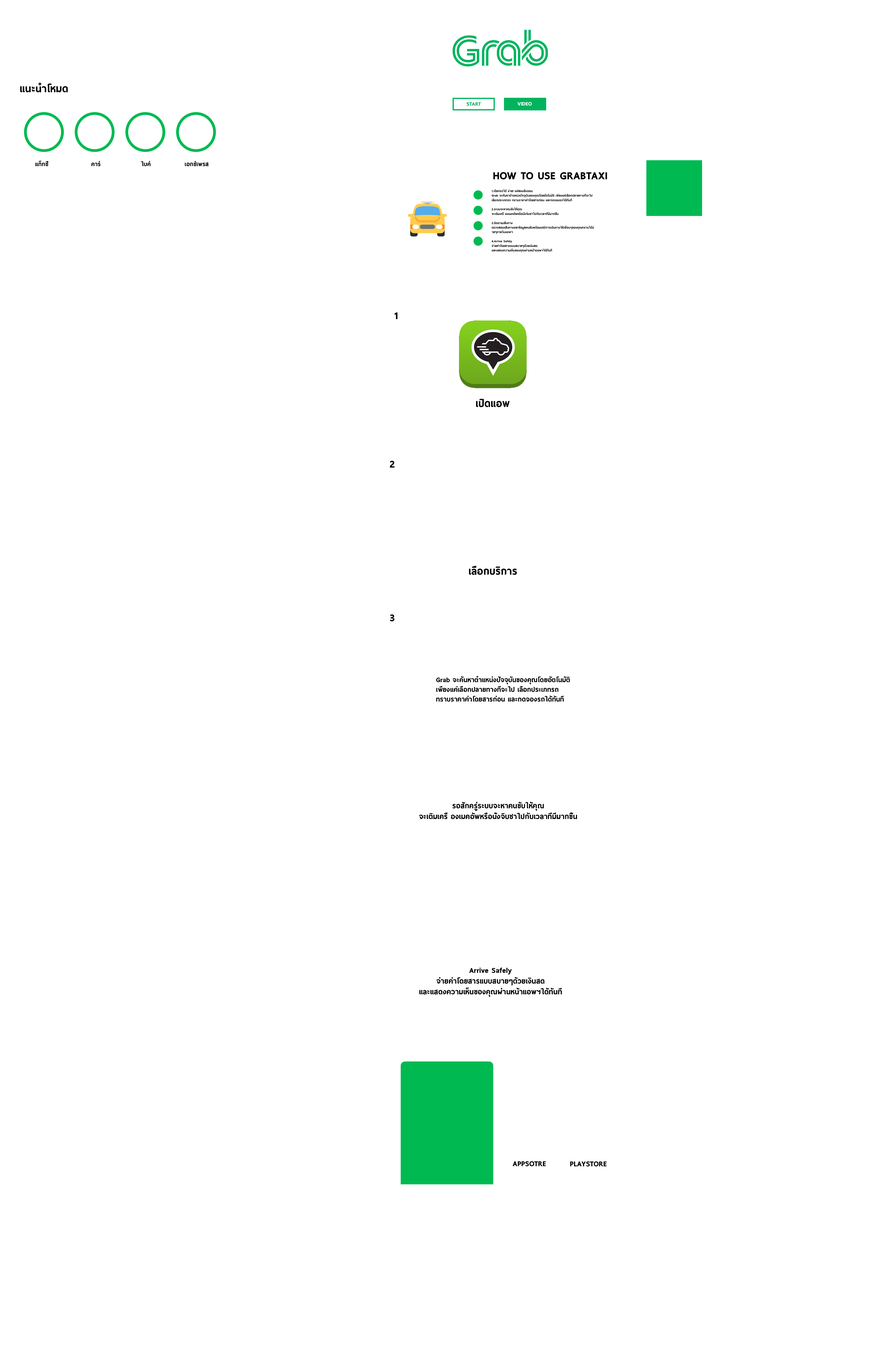
<style>
.page{position:relative;width:873px;height:1365px;background:#ffffff}
.page>*{position:absolute;margin:0}
.t1{font:12.5px "ThaiSansNeue-Black";color:#000000}
.t2{font:6.4px "ThaiSansNeue-Black";color:#ffffff}
.t3{font:6.4px "ThaiSansNeue-Black";color:#00b45e}
.t4{font:7.1px "ThaiSansNeue-Black";color:#000000}
.t5{font:13.1px "ThaiSansNeue-Black";color:#000000}
.t6{font:3.8px "ThaiSansNeue-Black";color:#000000}
.t7{font:8.1px "ThaiSansNeue-Black";color:#000000}
.t8{font:9px "ThaiSansNeue-Black";color:#000000}
</style>
<div class="page">
<p class="t1" style="left:20px;top:83px;width:48px;height:9px">แนะนำโหมด</p>
<p class="t2" style="left:518px;top:102px;width:14px;height:4px">VIDEO</p>
<p class="t3" style="left:467px;top:102px;width:14px;height:4px">START</p>
<p class="t4" style="left:35px;top:160px;width:174px;height:6px">แท็กซี่       คาร์       ไบค์      เอกซ์เพรส</p>
<p class="t5" style="left:493px;top:172px;width:114px;height:7px">HOW TO USE GRABTAXI</p>
<p class="t6" style="left:492px;top:189px;width:102px;height:64px">1.เรียกรถได้ ง่าย! แค่สองขั้นตอน<br>Grab จะค้นหาตำแหน่งปัจจุบันของคุณโดยอัตโนมัติ เพียงแค่เลือกปลายทางที่จะไป เลือกประเภทรถ ทราบราคาค่าโดยสารก่อน และกดจองรถได้ทันที<br><br>2.ระบบจะหาคนขับให้คุณ<br>จะเติมเครื่ องเมคอัพหรือนั่งจิบชาไปกับเวลาที่มีมากขึ้น<br><br>3.ติดตามเส้นทาง<br>ตรวจสอบเส้นทางและข้อมูลคนขับพร้อมแชร์การเดินทางให้เพื่อนๆของคุณทราบได้ง่ายๆภายในแอพฯ<br><br>4.Arrive Safely<br>จ่ายค่าโดยสารแบบสบายๆด้วยเงินสด และแสดงความเห็นของคุณผ่านหน้าแอพฯได้ทันที</p>
<p class="t1" style="left:395px;top:312px;width:3px;height:7px">1</p>
<p class="t1" style="left:476px;top:399px;width:34px;height:8px">เปิดแอพ</p>
<p class="t1" style="left:390px;top:461px;width:5px;height:7px">2</p>
<p class="t1" style="left:469px;top:566px;width:48px;height:9px">เลือกบริการ</p>
<p class="t1" style="left:390px;top:614px;width:5px;height:8px">3</p>
<p class="t7" style="left:436px;top:676px;width:134px;height:26px">Grab จะค้นหาตำแหน่งปัจจุบันของคุณโดยอัตโนมัติ เพียงแค่เลือกปลายทางที่จะไป เลือกประเภทรถ ทราบราคาค่าโดยสารก่อน และกดจองรถได้ทันที</p>
<p class="t8" style="left:419px;top:802px;width:158px;height:17px;text-align:center">รอสักครู่ระบบจะหาคนขับให้คุณ<br>จะเติมเครื่ องเมคอัพหรือนั่งจิบชาไปกับเวลาที่มีมากขึ้น</p>
<p class="t8" style="left:420px;top:968px;width:142px;height:29px;text-align:center">Arrive Safely<br>จ่ายค่าโดยสารแบบสบายๆด้วยเงินสด และแสดงความเห็นของคุณผ่านหน้าแอพฯได้ทันที</p>
<p class="t8" style="left:513px;top:1161px;width:33px;height:6px">APPSOTRE</p>
<p class="t8" style="left:570px;top:1162px;width:37px;height:5px">PLAYSTORE</p>
</div>
